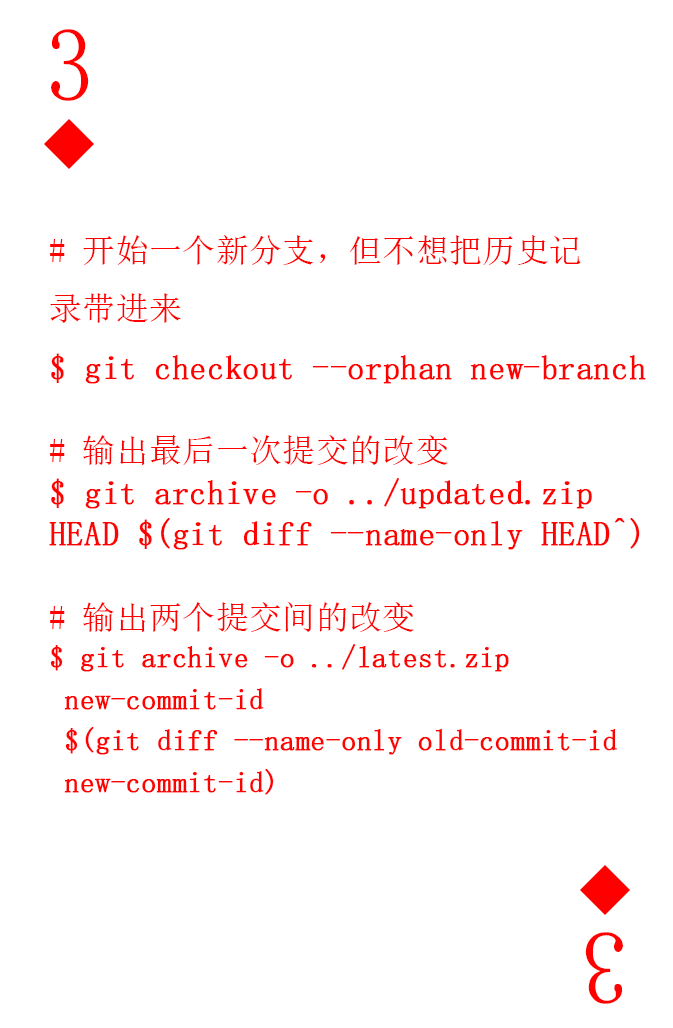
<style>
.page{position:relative;width:673px;height:1028px;background:#ffffff}
.page>*{position:absolute;margin:0}
.t1{font:104.2px "SimSun-ExtB";color:#ff0101;scale:0.93 1}
.t2{font:29.2px/41.7px "SimSun";color:#ff0101;font-weight:bold}
.t3{font:33.3px "SimSun";color:#ff0101}
.t4{font:33.3px/41.7px "SimSun";color:#ff0101;font-weight:bold}
.t5{font:33.3px/41.7px "SimSun";color:#ff0101}
</style>
<div class="page">
<p class="t1" style="left:51px;top:29px;width:38px;height:72px">3</p>
<p class="t2" style="left:49px;top:235px;width:597px;height:560px"><span class="t3"># 开始一个新分支，但不想把历史记<br>录带进来<br></span><span class="t4">$ git checkout --orphan new-branch<br><br></span><span class="t5"># 输出最后一次提交的改变<br></span><span class="t4">$ git archive -o ../updated.zip <br>HEAD $(git diff --name-only HEAD^)<br></span><span class="t5"><br># 输出两个提交间的改变<br></span>$ git archive -o ../latest.zip <br> new-commit-id<br> $(git diff --name-only old-commit-id<br> new-commit-id)</p>
<p class="t1" style="left:585px;top:932px;width:38px;height:72px;rotate:180deg">3</p>
</div>
